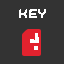
<style>
.page{position:relative;width:64px;height:64px;background:#333333}
.page>*{position:absolute;margin:0}
.t1{font:12px "Furore";letter-spacing:0.109em;color:#ffffff}
</style>
<div class="page">
<p class="t1" style="left:19px;top:9px;width:27px;height:9px">KEY</p>
</div>
